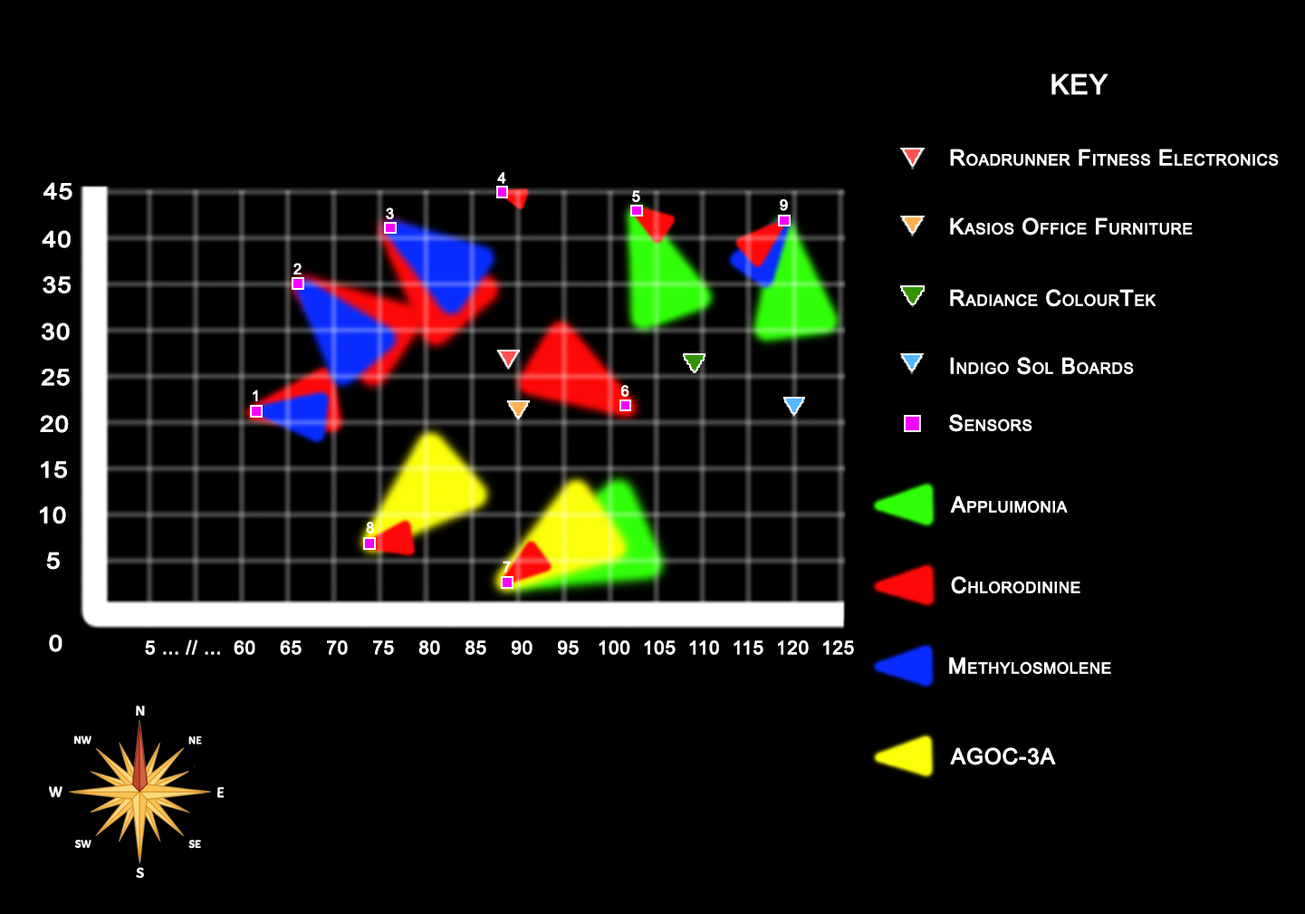
<style>
.page{position:relative;width:1305px;height:914px;background:#000000}
.page>*{position:absolute;margin:0}
.t1{font:27.3px "ArialMT";letter-spacing:0.02em;color:#ffffff;font-variant:small-caps;font-weight:bold}
.t2{font:21.7px "ArialMT";letter-spacing:0.02em;color:#ffffff;font-variant:small-caps;font-weight:bold}
.t3{font:14.8px "ArialMT";letter-spacing:0.02em;color:#ffffff;font-variant:small-caps;font-weight:bold}
.t4{font:22.2px "ArialMT";letter-spacing:0.02em;color:#ffffff;font-variant:small-caps;font-weight:bold;scale:1.12 1}
.t5{font:18.4px "ArialMT";letter-spacing:0.02em;color:#ffffff;font-variant:small-caps;font-weight:bold}
</style>
<div class="page">
<p class="t1" style="left:1051px;top:73px;width:57px;height:22px">KEY</p>
<p class="t2" style="left:950px;top:149px;width:329px;height:17px">Roadrunner Fitness Electronics</p>
<p class="t3" style="left:497px;top:172px;width:9px;height:12px">4</p>
<p class="t4" style="left:43px;top:182px;width:29px;height:18px">45</p>
<p class="t3" style="left:632px;top:190px;width:8px;height:12px">5</p>
<p class="t3" style="left:386px;top:207px;width:8px;height:12px">3</p>
<p class="t3" style="left:780px;top:199px;width:8px;height:12px">9</p>
<p class="t2" style="left:950px;top:217px;width:243px;height:18px">Kasios Office Furniture</p>
<p class="t4" style="left:42px;top:230px;width:29px;height:18px">40</p>
<p class="t3" style="left:293px;top:263px;width:9px;height:11px">2</p>
<p class="t4" style="left:43px;top:276px;width:28px;height:17px">35</p>
<p class="t2" style="left:950px;top:289px;width:206px;height:18px">Radiance ColourTek</p>
<p class="t4" style="left:42px;top:322px;width:28px;height:19px">30</p>
<p class="t2" style="left:950px;top:357px;width:184px;height:18px">Indigo Sol Boards</p>
<p class="t4" style="left:41px;top:369px;width:29px;height:17px">25</p>
<p class="t3" style="left:253px;top:389px;width:5px;height:12px">1</p>
<p class="t3" style="left:620px;top:385px;width:9px;height:12px">6</p>
<p class="t2" style="left:949px;top:414px;width:83px;height:18px">Sensors</p>
<p class="t4" style="left:40px;top:415px;width:29px;height:18px">20</p>
<p class="t4" style="left:41px;top:461px;width:26px;height:17px">15</p>
<p class="t2" style="left:950px;top:495px;width:118px;height:18px">Appluimonia</p>
<p class="t4" style="left:40px;top:506px;width:26px;height:17px">10</p>
<p class="t3" style="left:366px;top:522px;width:8px;height:11px">8</p>
<p class="t4" style="left:46px;top:552px;width:14px;height:18px">5</p>
<p class="t3" style="left:503px;top:561px;width:8px;height:11px">7</p>
<p class="t2" style="left:951px;top:576px;width:129px;height:18px">Chlorodinine</p>
<p class="t4" style="left:49px;top:634px;width:13px;height:18px">0</p>
<p class="t5" style="left:145px;top:639px;width:709px;height:16px">5 ... // ...  60    65    70    75    80    85    90    95   100  105  110  115  120  125</p>
<p class="t2" style="left:949px;top:657px;width:162px;height:17px">Methylosmolene</p>
<p class="t2" style="left:950px;top:747px;width:106px;height:18px">AGOC-3A</p>
</div>
